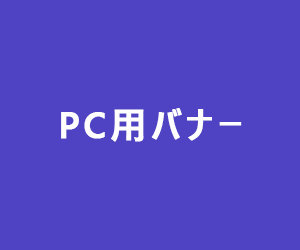
<style>
.page{position:relative;width:300px;height:250px;background:#4f43c3}
.page>*{position:absolute;margin:0}
.t1{font:36px "YuGothicUI-Bold";letter-spacing:0.1em;color:#fefefe;font-weight:bold}
</style>
<div class="page">
<p class="t1" style="left:61px;top:108px;width:181px;height:34px">PC用バナー</p>
</div>
